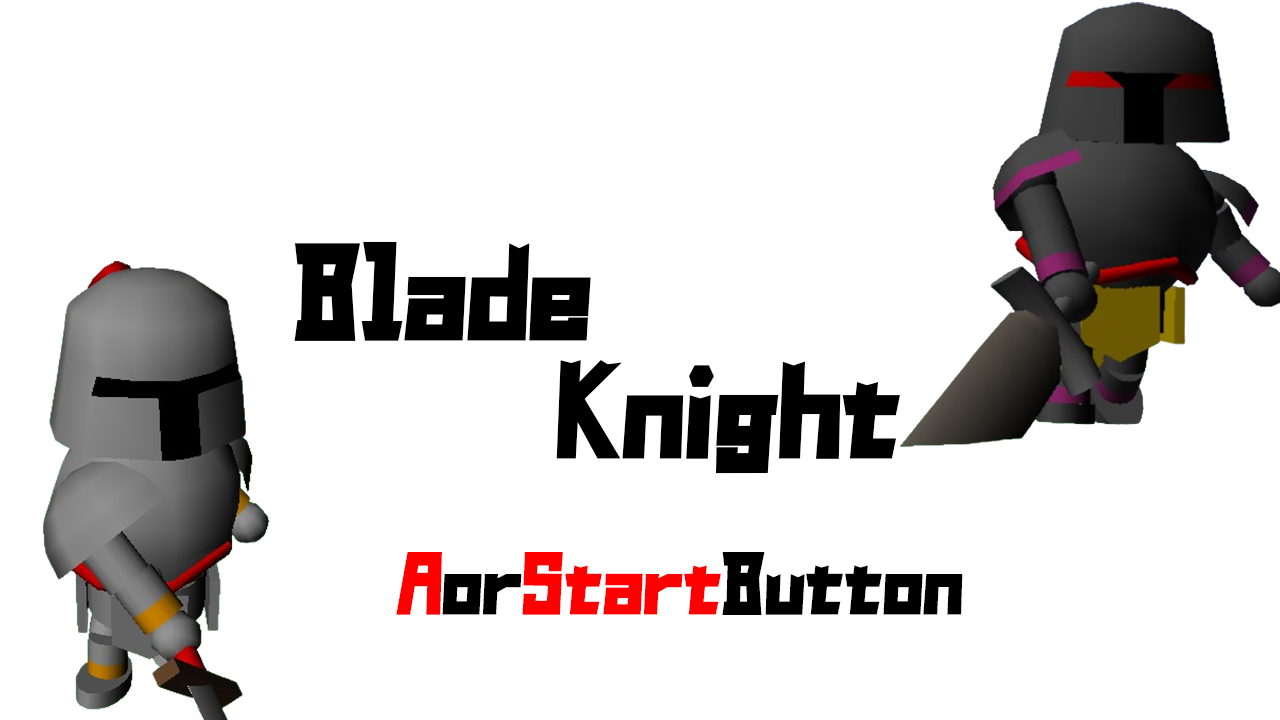
<style>
.page{position:relative;width:1280px;height:720px;background:#ffffff}
.page>*{position:absolute;margin:0}
.t1{font:125px "GN-KagakuGothic";color:#000000}
.t2{font:80.4px "GN-KagakuGothic";color:#000000}
.t3{font:80.4px "GN-KagakuGothic";color:#ff0000}
</style>
<div class="page">
<p class="t1" style="left:294px;top:241px;width:297px;height:100px">Blade</p>
<p class="t1" style="left:556px;top:360px;width:344px;height:114px">Knight</p>
<p class="t2" style="left:396px;top:552px;width:567px;height:63px"><span class="t3">A</span>or<span class="t3">Start</span>Button</p>
</div>
